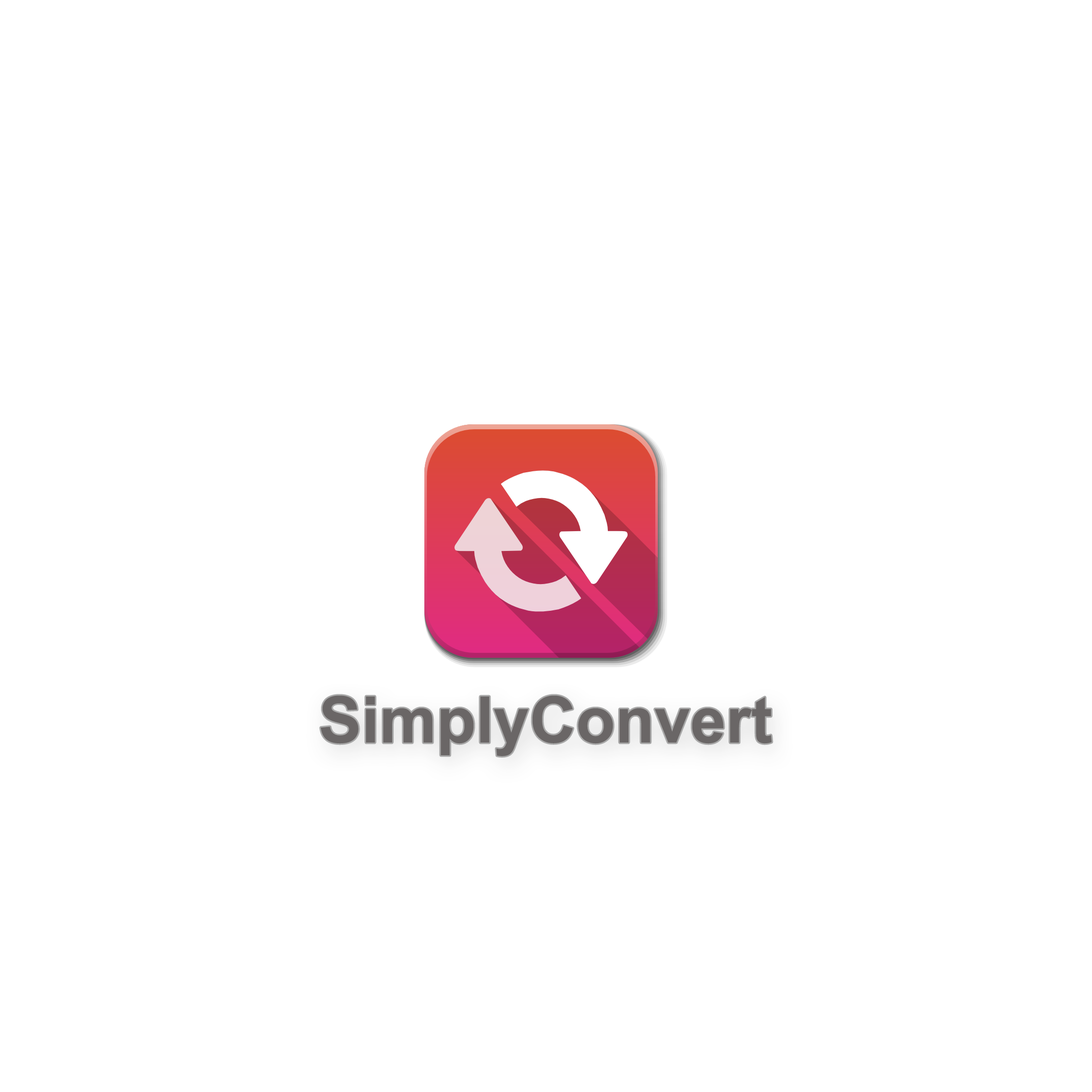
<style>
.page{position:relative;width:1092px;height:1092px;background:#ffffff}
.page>*{position:absolute;margin:0}
.t1{font:64.3px "Arial-BoldMT";color:#6a6666}
</style>
<div class="page">
<p class="t1" style="left:320px;top:695px;width:452px;height:61px">SimplyConvert</p>
</div>
